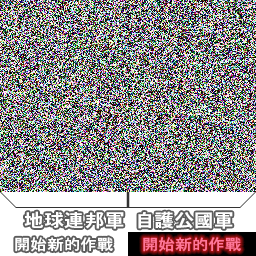
<style>
.page{position:relative;width:256px;height:256px}
.page>*{position:absolute;margin:0}
.t1{font:18px "HeiseiKakuGoStd-W7";letter-spacing:0.04em;color:#ffffff;scale:1.09 1}
.t2{font:15px "HeiseiKakuGoStd-W5";letter-spacing:0.04em;color:#ffffff;scale:1.09 1}
.t3{font:15px "HeiseiKakuGoStd-W5";letter-spacing:0.04em;color:#ff7799;scale:1.09 1}
</style>
<div class="page">
<p class="t1" style="left:24px;top:211px;width:100px;height:18px">地球連邦軍</p>
<p class="t1" style="left:138px;top:211px;width:95px;height:18px">自護公國軍</p>
<p class="t2" style="left:15px;top:237px;width:98px;height:15px">開始新的作戰</p>
<p class="t3" style="left:143px;top:237px;width:98px;height:15px">開始新的作戰</p>
</div>
